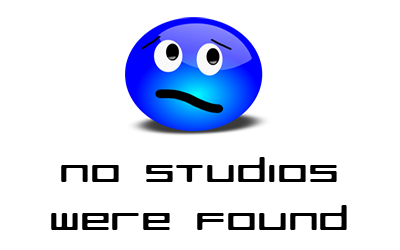
<style>
.page{position:relative;width:400px;height:250px;background:#ffffff}
.page>*{position:absolute;margin:0}
.t1{font:32px "RazerRegular";color:#000000;scale:1.5 1}
</style>
<div class="page">
<p class="t1" style="left:51px;top:157px;width:296px;height:73px;text-align:center">No studios<br>were found</p>
</div>
